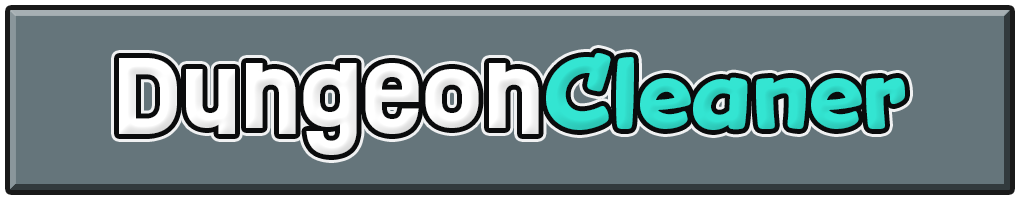
<style>
.page{position:relative;width:1020px;height:200px;background:#65757b}
.page>*{position:absolute;margin:0}
.t1{font:100px "Ruddy-Bold";color:#ffffff}
.t2{font:100px "Snicker-Bold";color:#33e5d2}
</style>
<div class="page">
<p class="t1" style="left:119px;top:53px;width:786px;height:102px">Dungeon<span class="t2">Cleaner</span></p>
</div>
